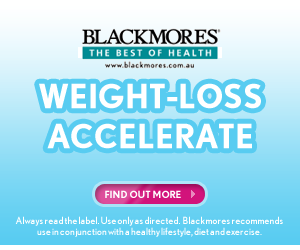
<style>
.page{position:relative;width:300px;height:250px}
.page>*{position:absolute;margin:0}
.t1{font:33px/40px "NobelBold";color:#ffffff}
.t2{font:10px "NobelBold";color:#ffffff}
.t3{font:10px/11px "NobelRegular";color:#ffffff}
</style>
<div class="page">
<p class="t1" style="left:39px;top:83px;width:222px;height:66px;text-align:center">WEIGHT-LOSS<br>ACCELERATE</p>
<p class="t2" style="left:105px;top:190px;width:76px;height:8px">FIND OUT MORE</p>
<p class="t3" style="left:15px;top:216px;width:268px;height:21px;text-align:center">Always read the label. Use only as directed.  Blackmores recommends use in conjunction with a healthy lifestyle, diet and exercise.</p>
</div>
